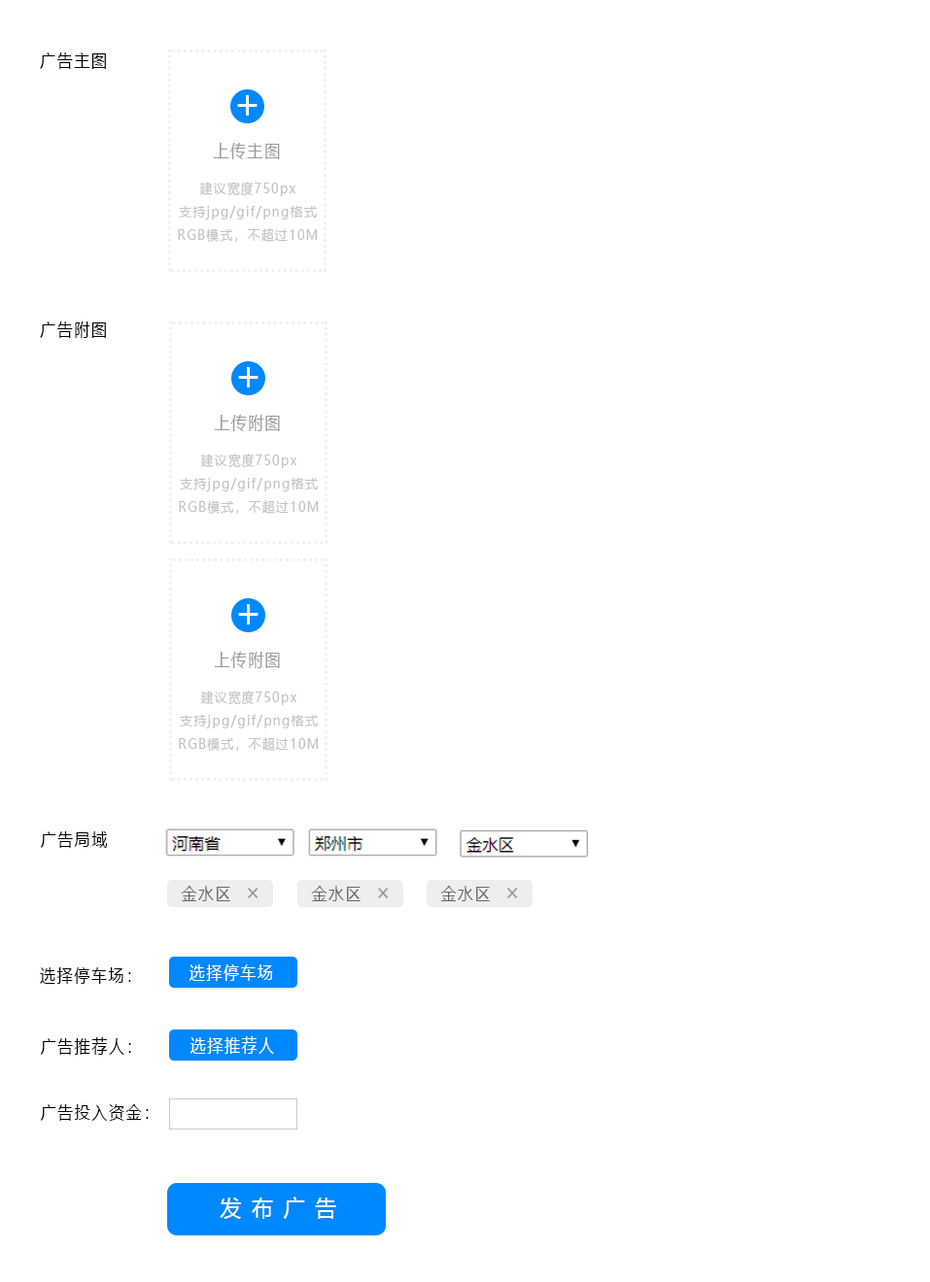
<style>
.page{position:relative;width:930px;height:1282px;background:#ffffff}
.page>*{position:absolute;margin:0}
.t1{font:17.5px "MicrosoftYaHei";letter-spacing:0.1em;color:#000000;scale:0.9 1}
.t2{font:42.1px "MicrosoftYaHei";letter-spacing:0.1em;color:#ffffff;scale:0.9 1}
.t3{font:17.5px "MicrosoftYaHei";letter-spacing:0.1em;color:#999999;scale:0.9 1}
.t4{font:13.6px/23.3px "MicrosoftYaHei";letter-spacing:0.1em;color:#c3c3c3;scale:0.9 1}
.t5{font:17.5px "MicrosoftYaHei";letter-spacing:0.1em;color:#666666;scale:0.9 1}
.t6{font:23.3px "MicrosoftYaHei";letter-spacing:0.1em;color:#999999;scale:0.9 1}
.t7{font:17.5px "MicrosoftYaHei";letter-spacing:0.1em;color:#ffffff;scale:0.9 1}
.t8{font:23.3px "MicrosoftYaHei";letter-spacing:0.1em;color:#ffffff;scale:0.9 1}
</style>
<div class="page">
<p class="t1" style="left:40px;top:52px;width:66px;height:17px">广告主图</p>
<p class="t2" style="left:237px;top:95px;width:20px;height:21px">＋</p>
<p class="t3" style="left:213px;top:143px;width:67px;height:16px">上传主图</p>
<p class="t4" style="left:178px;top:182px;width:140px;height:60px;text-align:center">建议宽度750px<br>支持jpg/gif/png格式<br>RGB模式，不超过10M</p>
<p class="t1" style="left:40px;top:322px;width:66px;height:16px">广告附图</p>
<p class="t2" style="left:238px;top:367px;width:20px;height:21px">＋</p>
<p class="t3" style="left:214px;top:415px;width:66px;height:16px">上传附图</p>
<p class="t4" style="left:179px;top:454px;width:140px;height:60px;text-align:center">建议宽度750px<br>支持jpg/gif/png格式<br>RGB模式，不超过10M</p>
<p class="t2" style="left:238px;top:604px;width:20px;height:21px">＋</p>
<p class="t3" style="left:214px;top:652px;width:66px;height:16px">上传附图</p>
<p class="t4" style="left:179px;top:691px;width:140px;height:60px;text-align:center">建议宽度750px<br>支持jpg/gif/png格式<br>RGB模式，不超过10M</p>
<p class="t1" style="left:41px;top:832px;width:67px;height:16px">广告局域</p>
<p class="t5" style="left:181px;top:886px;width:77px;height:16px">金水区  <span class="t6">×</span></p>
<p class="t5" style="left:311px;top:886px;width:78px;height:16px">金水区  <span class="t6">×</span></p>
<p class="t5" style="left:440px;top:886px;width:78px;height:16px">金水区  <span class="t6">×</span></p>
<p class="t7" style="left:188px;top:965px;width:85px;height:16px">选择停车场</p>
<p class="t1" style="left:40px;top:968px;width:91px;height:16px">选择停车场：</p>
<p class="t1" style="left:41px;top:1038px;width:90px;height:17px">广告推荐人：</p>
<p class="t7" style="left:189px;top:1037px;width:85px;height:17px">选择推荐人</p>
<p class="t1" style="left:41px;top:1105px;width:108px;height:16px">广告投入资金：</p>
<p class="t8" style="left:220px;top:1197px;width:116px;height:22px">发 布 广 告</p>
</div>
